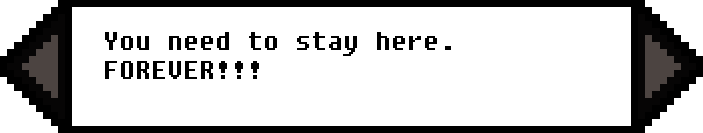
<style>
.page{position:relative;width:703px;height:133px;background:#ffffff}
.page>*{position:absolute;margin:0}
.t1{font:24px "Fixedsys";color:#000000}
</style>
<div class="page">
<p class="t1" style="left:105px;top:32px;width:346px;height:47px">You need to stay here.<br>FOREVER!!!</p>
</div>
